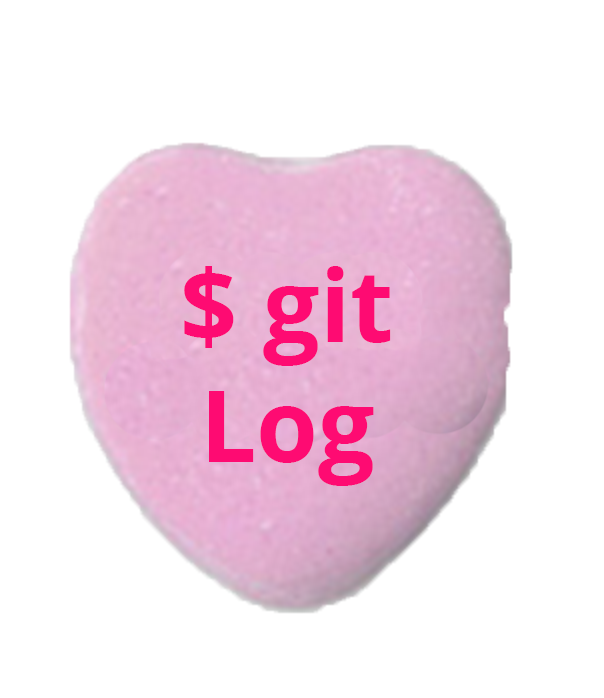
<style>
.page{position:relative;width:604px;height:698px;background:#ffffff}
.page>*{position:absolute;margin:0}
.t1{font:100px "OpenSans-Bold";color:#fe0b72}
</style>
<div class="page">
<p class="t1" style="left:184px;top:266px;width:207px;height:220px;text-align:center">$ git<br>Log</p>
</div>
